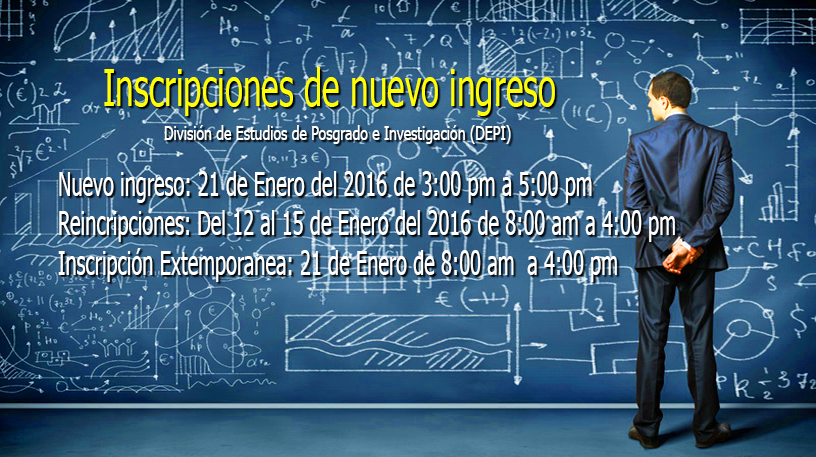
<style>
.page{position:relative;width:816px;height:457px}
.page>*{position:absolute;margin:0}
.t1{font:50.7px "Tahoma";color:#ffff00;scale:0.66 1}
.t2{font:18.7px "Tahoma";color:#ffffff;scale:0.75 1}
.t3{font:33.1px "Tahoma";color:#ffffff;scale:0.6 1}
</style>
<div class="page">
<p class="t1" style="left:104px;top:67px;width:451px;height:49px">Inscripciones de nuevo ingreso</p>
<p class="t2" style="left:164px;top:125px;width:347px;height:19px">División de Estudios de Posgrado e Investigación (DEPI)</p>
<p class="t3" style="left:58px;top:171px;width:617px;height:111px">Nuevo ingreso: 21 de Enero del 2016 de 3:00 pm a 5:00 pm<br>Reincripciones: Del 12 al 15 de Enero del 2016 de 8:00 am a 4:00 pm<br>Inscripción Extemporanea: 21 de Enero de 8:00 am  a 4:00 pm</p>
</div>
